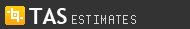
<style>
.page{position:relative;width:190px;height:29px;background:#333333}
.page>*{position:absolute;margin:0}
.t1{font:22px "TrebuchetMS-Bold";color:#ffffff}
.t2{font:10px "HighPixel-7";letter-spacing:0.14em;color:#d7d7d7}
</style>
<div class="page">
<p class="t1" style="left:29px;top:8px;width:38px;height:16px">TAS</p>
<p class="t2" style="left:72px;top:15px;width:64px;height:9px">ESTIMATES</p>
</div>
